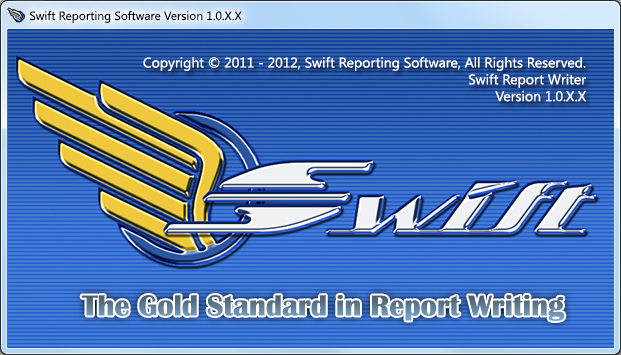
<style>
.page{position:relative;width:621px;height:355px}
.page>*{position:absolute;margin:0}
.t1{font:12px "SegoeUI";color:#000000}
.t2{font:14px "SegoeUI";color:#ffffff}
.t3{font:30px "BritannicBold"}
</style>
<div class="page">
<p class="t1" style="left:30px;top:10px;width:212px;height:13px">Swift Reporting Software Version 1.0.X.X</p>
<p class="t2" style="left:143px;top:56px;width:443px;height:46px;text-align:right">Copyright © 2011 - 2012, Swift Reporting Software, All Rights Reserved.<br>Swift Report Writer<br>Version 1.0.X.X</p>
<p class="t3" style="left:81px;top:295px;width:484px;height:26px">The Gold Standard in Report Writing</p>
</div>
